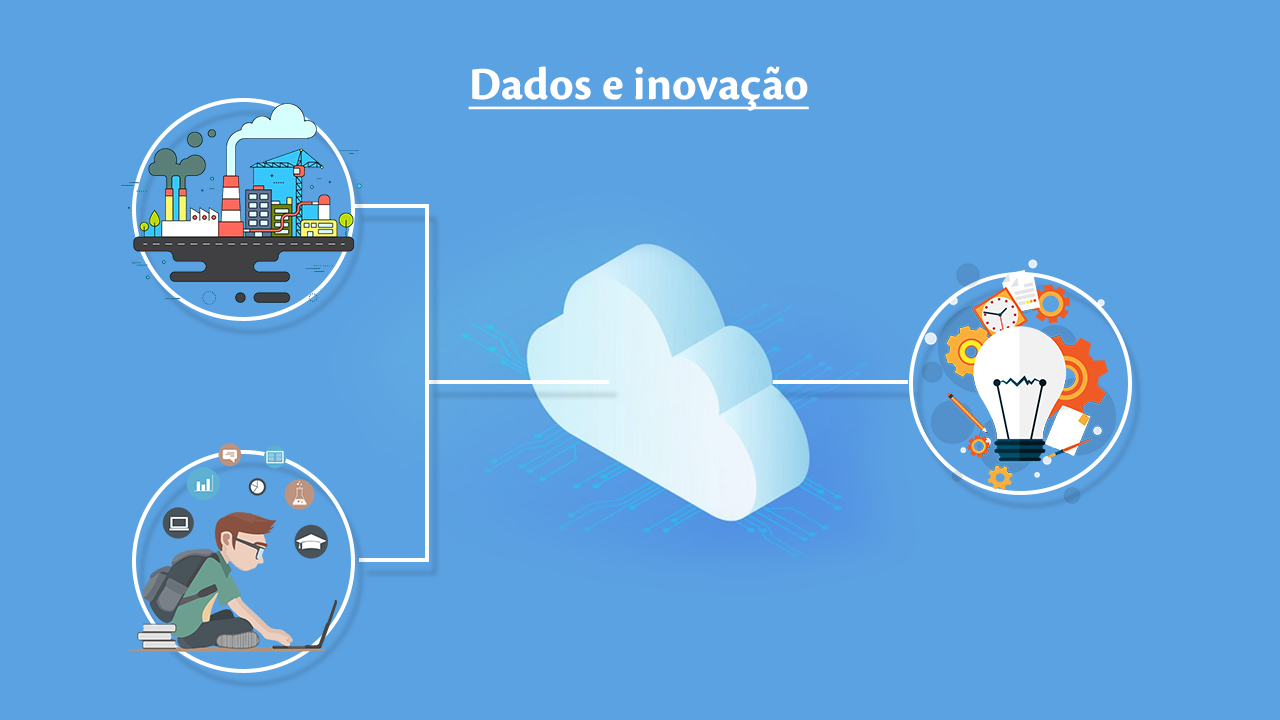
<style>
.page{position:relative;width:1280px;height:720px;background:#5ba2e2}
.page>*{position:absolute;margin:0}
.t1{font:48px "CronosPro-Bold";color:#ffffff;text-decoration:underline}
</style>
<div class="page">
<p class="t1" style="left:468px;top:66px;width:341px;height:45px">Dados e inovação</p>
</div>
